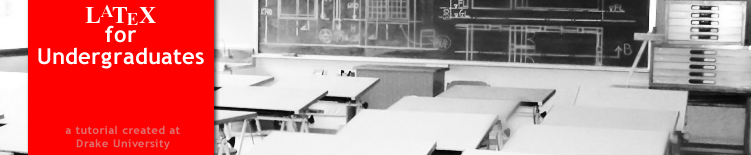
<style>
.page{position:relative;width:751px;height:155px;background:#ff0000}
.page>*{position:absolute;margin:0}
.t1{font:18px "TimesNewRomanPS-BoldMT";color:#ffffff}
.t2{font:22px/22px "TrebuchetMS-Bold";color:#ffffff}
.t3{font:24px/22px "TimesNewRomanPS-BoldMT";color:#ffffff}
.t4{font:11px "TrebuchetMS-Bold";color:#e16e6e}
</style>
<div class="page">
<p class="t1" style="left:100px;top:4px;width:14px;height:13px">A</p>
<p class="t2" style="left:38px;top:7px;width:166px;height:62px;text-align:center"><span class="t3">L  T  X<br></span>for<br>Undergraduates</p>
<p class="t1" style="left:126px;top:13px;width:12px;height:12px">E</p>
<p class="t4" style="left:65px;top:125px;width:115px;height:25px;text-align:center">a tutorial created at<br>Drake University</p>
</div>
